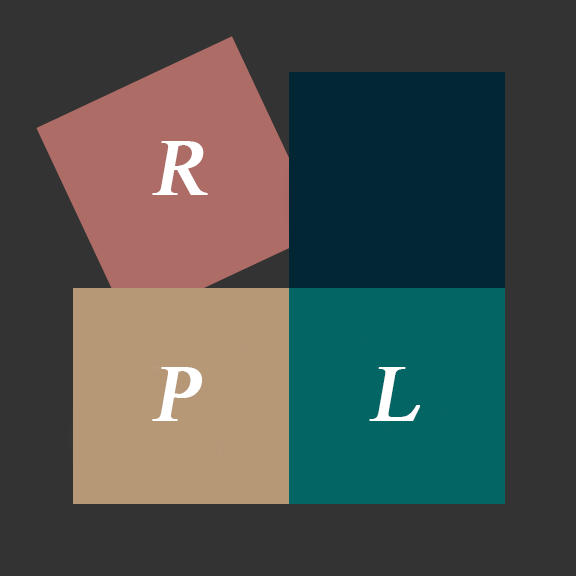
<style>
.page{position:relative;width:576px;height:576px;background:#333333}
.page>*{position:absolute;margin:0}
.t1{font:80px "TimesNewRomanPSMT";color:#ffffff;font-weight:bold;font-style:italic}
</style>
<div class="page">
<p class="t1" style="left:152px;top:141px;width:56px;height:54px">R</p>
<p class="t1" style="left:152px;top:367px;width:50px;height:54px">P</p>
<p class="t1" style="left:369px;top:367px;width:51px;height:54px">L</p>
</div>
